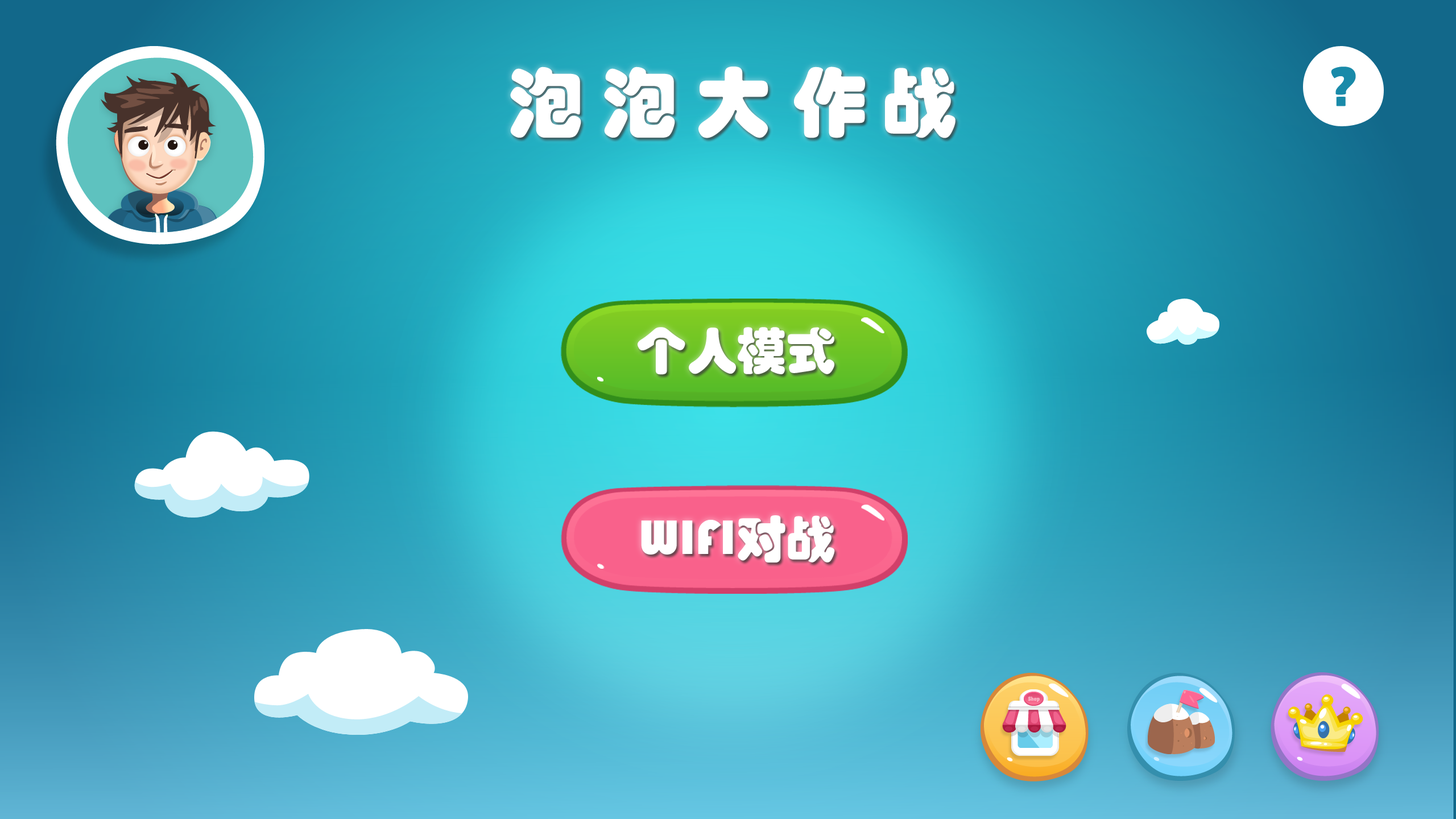
<style>
.page{position:relative;width:1456px;height:819px}
.page>*{position:absolute;margin:0}
.t1{font:75.6px "STHupo";color:#ffffff}
.t2{font:50px "STHupo";color:#ffffff}
</style>
<div class="page">
<p class="t1" style="left:510px;top:67px;width:445px;height:71px">泡 泡 大 作 战</p>
<p class="t2" style="left:638px;top:327px;width:196px;height:48px">个人模式</p>
<p class="t2" style="left:641px;top:515px;width:194px;height:47px">WIFI对战</p>
</div>
